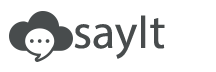
<style>
.page{position:relative;width:216px;height:72px;background:#ffffff}
.page>*{position:absolute;margin:0}
.t1{font:48px "MyriadPro-Regular";color:#484c4d}
</style>
<div class="page">
<p class="t1" style="left:74px;top:15px;width:91px;height:44px">sayIt</p>
</div>
